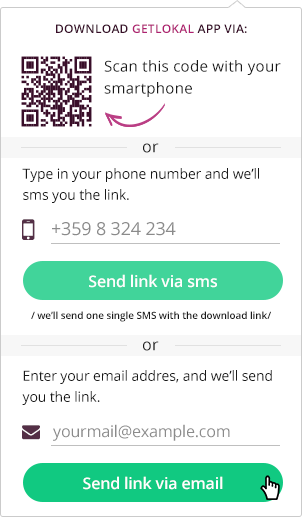
<style>
.page{position:relative;width:302px;height:517px;background:#ffffff}
.page>*{position:absolute;margin:0}
.t1{font:12px "OpenSans-Semibold";letter-spacing:0.02em;color:#390e29;text-transform:uppercase}
.t2{font:12px "OpenSans-Semibold";letter-spacing:0.02em;color:#af2071;text-transform:uppercase}
.t3{font:15px/22px "OpenSans";letter-spacing:0.02em;color:#191919}
.t4{font:16px "OpenSans";letter-spacing:0.02em;color:#191919}
.t5{font:14px/21px "OpenSans";letter-spacing:-0.01em;color:#191919}
.t6{font:18px "OpenSans";letter-spacing:-0.01em;color:#8b8b8b;text-transform:uppercase}
.t7{font:16px "OpenSans-Semibold";letter-spacing:-0.01em;color:#fefefe}
.t8{font:10px "OpenSans-Semibold";letter-spacing:-0.01em;color:#191919}
.t9{font:16px "OpenSans";letter-spacing:-0.01em;color:#8b8b8b}
</style>
<div class="page">
<p class="t1" style="left:56px;top:24px;width:191px;height:9px">Download <span class="t2">Getlokal</span> app via:</p>
<p class="t3" style="left:104px;top:60px;width:177px;height:37px">Scan this code with your smartphone</p>
<p class="t4" style="left:143px;top:143px;width:16px;height:10px">or</p>
<p class="t5" style="left:22px;top:168px;width:237px;height:35px">Type in your phone number and we’ll sms you the link.</p>
<p class="t6" style="left:52px;top:222px;width:124px;height:14px">+359 8 324 234</p>
<p class="t7" style="left:89px;top:274px;width:128px;height:14px">Send link via sms</p>
<p class="t8" style="left:31px;top:311px;width:240px;height:11px">/ we’ll send one single SMS with the download link/</p>
<p class="t4" style="left:143px;top:341px;width:16px;height:10px">or</p>
<p class="t5" style="left:22px;top:370px;width:250px;height:35px">Enter your email addres, and we’ll send you the link.</p>
<p class="t9" style="left:53px;top:424px;width:177px;height:17px">yourmail@example.com</p>
<p class="t7" style="left:83px;top:476px;width:140px;height:14px">Send link via email</p>
</div>
